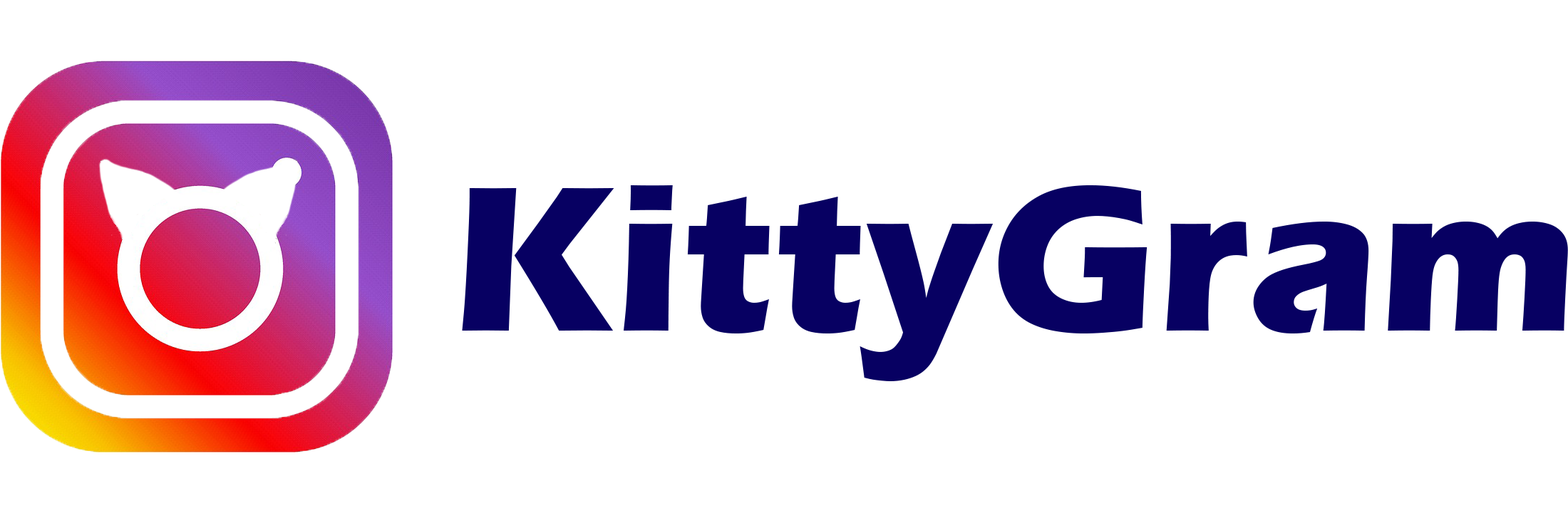
<style>
.page{position:relative;width:1568px;height:513px;background:#ffffff}
.page>*{position:absolute;margin:0}
.t1{font:213.8px "ErasITC-Bold";color:#070062}
</style>
<div class="page">
<p class="t1" style="left:462px;top:185px;width:1106px;height:196px">KittyGram</p>
</div>
